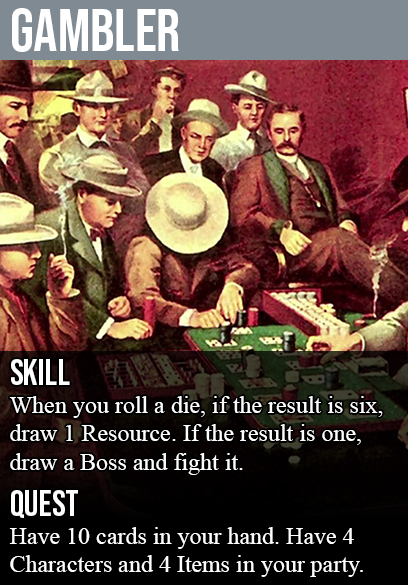
<style>
.page{position:relative;width:408px;height:585px}
.page>*{position:absolute;margin:0}
.t1{font:60px "BebasNeue-Regular";color:#ffffff}
.t2{font:36px "BebasNeue-Regular";color:#ffffff}
.t3{font:24px "TimesNewRomanPSMT";color:#ffffff}
</style>
<div class="page">
<p class="t1" style="left:12px;top:8px;width:167px;height:44px">gambler</p>
<p class="t2" style="left:11px;top:359px;width:59px;height:26px">skill</p>
<p class="t3" style="left:9px;top:396px;width:374px;height:79px">When you roll a die, if the result is six,<br>draw 1 Resource. If the result is one,<br>draw a Boss and fight it.</p>
<p class="t2" style="left:11px;top:490px;width:67px;height:28px">quest</p>
<p class="t3" style="left:9px;top:527px;width:354px;height:50px">Have 10 cards in your hand. Have 4<br>Characters and 4 Items in your party.</p>
</div>
